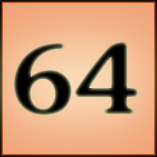
<style>
.page{position:relative;width:157px;height:157px}
.page>*{position:absolute;margin:0}
.t1{font:110px "ARJULIAN"}
</style>
<div class="page">
<p class="t1" style="left:13px;top:41px;width:125px;height:74px">64</p>
</div>
